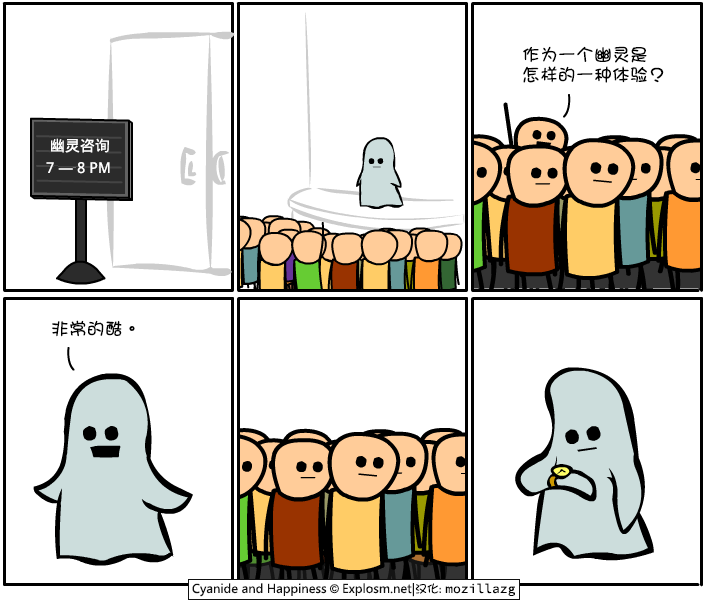
<style>
.page{position:relative;width:708px;height:603px;background:#ffffff}
.page>*{position:absolute;margin:0}
.t1{font:18px/20px "DFGirl";color:#000000}
.t2{font:15px/22px "WenQuanYiMicroHei";color:#ffffff}
.t3{font:18px "DFGirl";color:#000000}
</style>
<div class="page">
<p class="t1" style="left:523px;top:46px;width:141px;height:37px">作为一个幽灵是<br>怎样的一种体验？</p>
<p class="t2" style="left:46px;top:138px;width:64px;height:36px">幽灵咨询<br>7 — 8 PM</p>
<p class="t3" style="left:52px;top:320px;width:83px;height:17px">非常的酷。</p>
</div>
